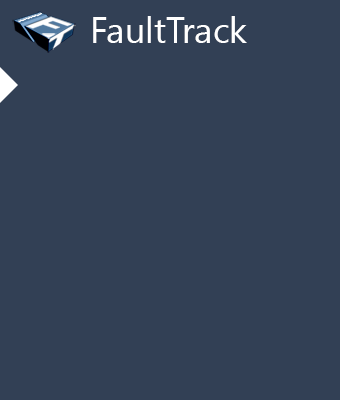
<style>
.page{position:relative;width:340px;height:400px;background:#324055}
.page>*{position:absolute;margin:0}
.t1{font:36px "SegoeUI";color:#ffffff}
</style>
<div class="page">
<p class="t1" style="left:93px;top:16px;width:154px;height:27px">FaultTrack</p>
</div>
